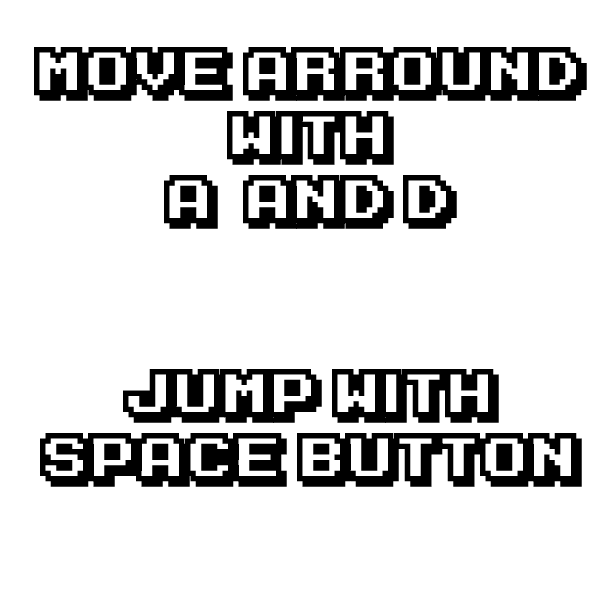
<style>
.page{position:relative;width:600px;height:600px;background:#ffffff}
.page>*{position:absolute;margin:0}
.t1{font:55px/64px "KarmaticArcade";color:#000000}
</style>
<div class="page">
<p class="t1" style="left:34px;top:47px;width:553px;height:182px;text-align:center">Move arround<br>with<br>A  and D</p>
<p class="t1" style="left:40px;top:369px;width:542px;height:118px;text-align:center">Jump with<br>space button</p>
</div>
